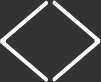
<style>
.page{position:relative;width:101px;height:82px;background:#333333}
.page>*{position:absolute;margin:0}
.t1{font:289px "MFShangYa_Noncommercial-Regular";color:#ffffff;scale:0.7 1}
</style>
<div class="page">
<p class="t1" style="left:0px;top:0px;width:48px;height:82px">&lt;</p>
<p class="t1" style="left:52px;top:0px;width:49px;height:82px">&gt;</p>
</div>
